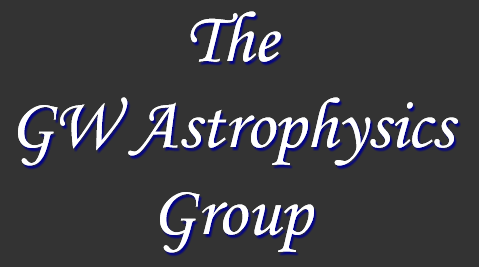
<style>
.page{position:relative;width:479px;height:267px;background:#333333}
.page>*{position:absolute;margin:0}
.t1{font:72px "MonotypeCorsiva";color:#ffffff}
</style>
<div class="page">
<p class="t1" style="left:18px;top:11px;width:440px;height:242px;text-align:center">The<br>GW Astrophysics<br>Group</p>
<p class="t1" style="left:18px;top:11px;width:440px;height:242px;text-align:center">The<br>GW Astrophysics<br>Group</p>
</div>
